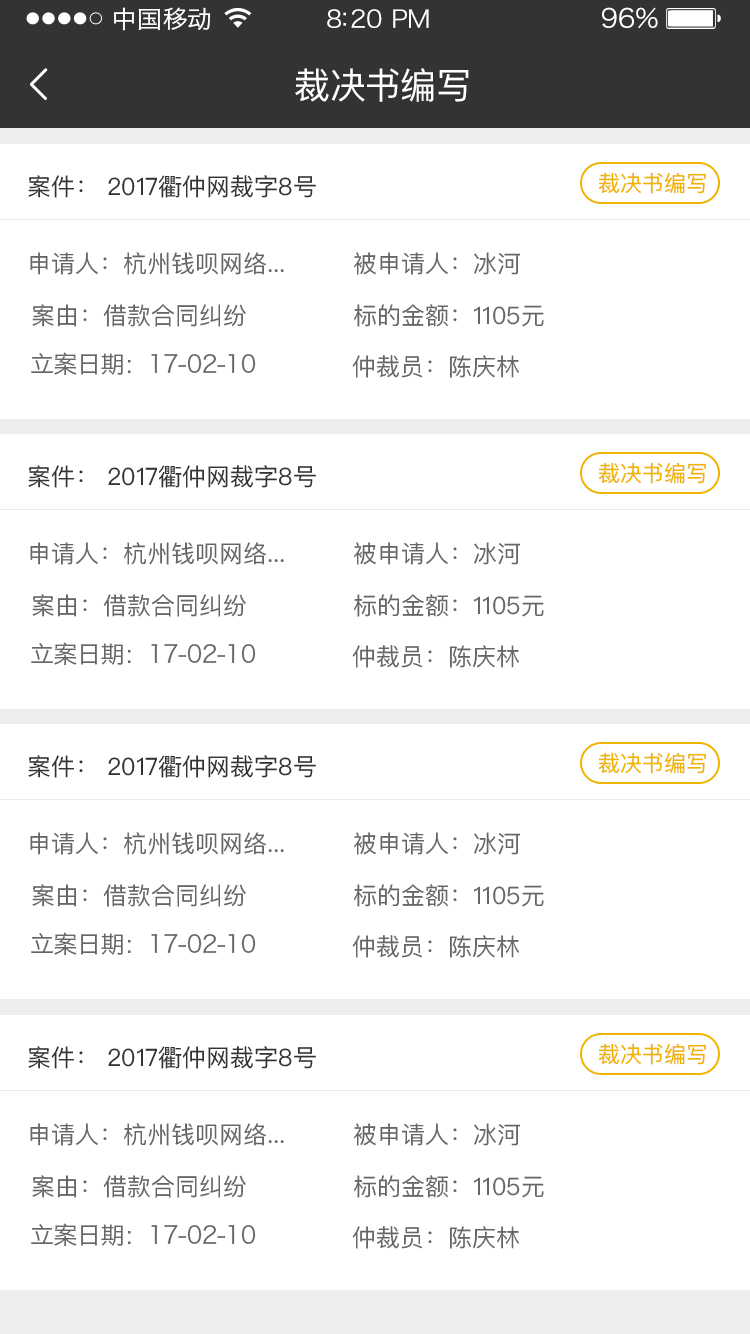
<style>
.page{position:relative;width:750px;height:1334px;background:#ffffff}
.page>*{position:absolute;margin:0}
.t1{font:24px "HiraginoSansGB-W3";letter-spacing:0.02em;color:#ffffff;scale:1.03 1}
.t2{font:24px "HiraginoSansGB-W3";letter-spacing:-0.02em;color:#ffffff;scale:1.03 1}
.t3{font:26.2px "HiraginoSansGB-W3";letter-spacing:-0.02em;color:#ffffff;scale:1.03 1}
.t4{font:36px "PingFangSC-Regular";letter-spacing:-0.02em;color:#ffffff}
.t5{font:22px "PingFangSC-Regular";color:#f0b300}
.t6{font:24px "PingFangSC-Regular";color:#333333}
.t7{font:24px "PingFangSC-Regular";color:#666666}
.t8{font:24px "HiraginoSansGB-W3";letter-spacing:-0.02em;color:#666666}
</style>
<div class="page">
<p class="t1" style="left:114px;top:7px;width:97px;height:24px">中国移动</p>
<p class="t2" style="left:327px;top:9px;width:102px;height:19px">8:20 PM</p>
<p class="t3" style="left:602px;top:7px;width:56px;height:22px">96%</p>
<p class="t4" style="left:295px;top:68px;width:174px;height:34px">裁决书编写</p>
<p class="t5" style="left:598px;top:172px;width:108px;height:22px">裁决书编写</p>
<p class="t6" style="left:28px;top:175px;width:288px;height:23px">案件： 2017衢仲网裁字8号</p>
<p class="t7" style="left:30px;top:252px;width:254px;height:23px">申请人：杭州钱呗网络...</p>
<p class="t7" style="left:354px;top:252px;width:166px;height:23px">被申请人：冰河</p>
<p class="t7" style="left:32px;top:304px;width:214px;height:23px">案由：借款合同纠纷</p>
<p class="t7" style="left:354px;top:304px;width:190px;height:23px">标的金额：1105元</p>
<p class="t8" style="left:31px;top:352px;width:225px;height:23px">立案日期：17-02-10</p>
<p class="t7" style="left:352px;top:355px;width:167px;height:23px">仲裁员：陈庆林</p>
<p class="t5" style="left:598px;top:462px;width:108px;height:22px">裁决书编写</p>
<p class="t6" style="left:28px;top:465px;width:288px;height:23px">案件： 2017衢仲网裁字8号</p>
<p class="t7" style="left:30px;top:542px;width:254px;height:23px">申请人：杭州钱呗网络...</p>
<p class="t7" style="left:354px;top:542px;width:166px;height:23px">被申请人：冰河</p>
<p class="t7" style="left:32px;top:594px;width:214px;height:23px">案由：借款合同纠纷</p>
<p class="t7" style="left:354px;top:594px;width:190px;height:23px">标的金额：1105元</p>
<p class="t8" style="left:31px;top:642px;width:225px;height:23px">立案日期：17-02-10</p>
<p class="t7" style="left:352px;top:645px;width:167px;height:23px">仲裁员：陈庆林</p>
<p class="t6" style="left:28px;top:755px;width:288px;height:23px">案件： 2017衢仲网裁字8号</p>
<p class="t5" style="left:598px;top:752px;width:108px;height:22px">裁决书编写</p>
<p class="t7" style="left:30px;top:832px;width:254px;height:23px">申请人：杭州钱呗网络...</p>
<p class="t7" style="left:354px;top:832px;width:166px;height:23px">被申请人：冰河</p>
<p class="t7" style="left:32px;top:884px;width:214px;height:23px">案由：借款合同纠纷</p>
<p class="t7" style="left:354px;top:884px;width:190px;height:23px">标的金额：1105元</p>
<p class="t8" style="left:31px;top:932px;width:225px;height:23px">立案日期：17-02-10</p>
<p class="t7" style="left:352px;top:935px;width:167px;height:23px">仲裁员：陈庆林</p>
<p class="t6" style="left:28px;top:1046px;width:288px;height:23px">案件： 2017衢仲网裁字8号</p>
<p class="t5" style="left:598px;top:1043px;width:108px;height:22px">裁决书编写</p>
<p class="t7" style="left:30px;top:1123px;width:254px;height:23px">申请人：杭州钱呗网络...</p>
<p class="t7" style="left:354px;top:1123px;width:166px;height:23px">被申请人：冰河</p>
<p class="t7" style="left:32px;top:1175px;width:214px;height:23px">案由：借款合同纠纷</p>
<p class="t7" style="left:354px;top:1175px;width:190px;height:23px">标的金额：1105元</p>
<p class="t8" style="left:31px;top:1223px;width:225px;height:23px">立案日期：17-02-10</p>
<p class="t7" style="left:352px;top:1226px;width:167px;height:23px">仲裁员：陈庆林</p>
</div>
